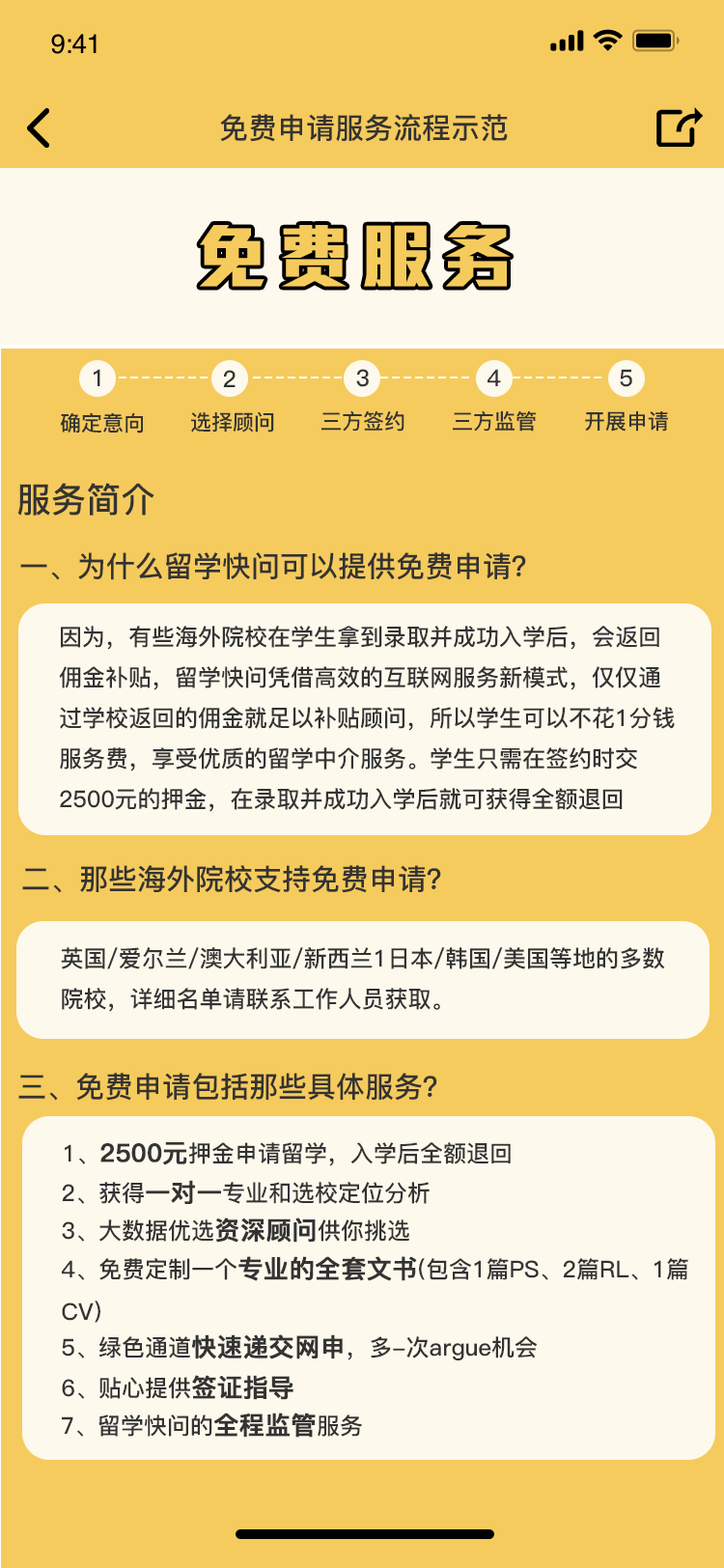
<style>
.page{position:relative;width:724px;height:1568px;background:#f6cb5d}
.page>*{position:absolute;margin:0}
.t1{font:29px "PingFang-SC-Bold";color:#333333}
.t2{font:69.5px "MStiffHeiPRC-UltraBold";letter-spacing:0.18em;color:#f6cb5d}
.t3{font:23.2px "PingFang-SC-Bold";letter-spacing:0.18em;color:#333333}
.t4{font:21.2px "PingFang-SC-Bold";color:#333333}
.t5{font:34.8px "PingFang-SC-Bold";color:#333333}
.t6{font:23.2px "PingFang-SC-Bold";color:#333333}
.t7{font:25.1px "PingFang-SC-Bold";color:#333333;font-weight:bold}
</style>
<div class="page">
<p class="t1" style="left:220px;top:114px;width:288px;height:28px">免费申请服务流程示范</p>
<p class="t2" style="left:200px;top:225px;width:311px;height:62px">免费服务</p>
<p class="t3" style="left:94px;top:369px;width:6px;height:17px">1</p>
<p class="t3" style="left:223px;top:370px;width:13px;height:17px">2</p>
<p class="t3" style="left:356px;top:369px;width:13px;height:18px">3</p>
<p class="t3" style="left:488px;top:369px;width:13px;height:17px">4</p>
<p class="t3" style="left:620px;top:369px;width:12px;height:18px">5</p>
<p class="t4" style="left:60px;top:412px;width:83px;height:22px">确定意向</p>
<p class="t4" style="left:191px;top:411px;width:83px;height:22px">选择顾问</p>
<p class="t4" style="left:322px;top:411px;width:83px;height:21px">三方签约</p>
<p class="t4" style="left:453px;top:410px;width:83px;height:22px">三方监管</p>
<p class="t4" style="left:585px;top:411px;width:83px;height:21px">开展申请</p>
<p class="t5" style="left:17px;top:483px;width:137px;height:33px">服务简介</p>
<p class="t1" style="left:20px;top:552px;width:506px;height:28px">一、为什么留学快问可以提供免费申请？</p>
<p class="t6" style="left:59px;top:626px;width:616px;height:186px">因为，有些海外院校在学生拿到录取并成功入学后，会返回<br>佣金补贴，留学快问凭借高效的互联网服务新模式，仅仅通<br>过学校返回的佣金就足以补贴顾问，所以学生可以不花1分钱<br>服务费，享受优质的留学中介服务。学生只需在签约时交<br>2500元的押金，在录取并成功入学后就可获得全额退回</p>
<p class="t1" style="left:22px;top:865px;width:419px;height:28px">二、那些海外院校支持免费申请？</p>
<p class="t6" style="left:61px;top:947px;width:604px;height:65px">英国/爱尔兰/澳大利亚/新西兰1日本/韩国/美国等地的多数<br>院校，详细名单请联系工作人员获取。</p>
<p class="t1" style="left:18px;top:1073px;width:419px;height:28px">三、免费申请包括那些具体服务？</p>
<p class="t6" style="left:65px;top:1142px;width:446px;height:24px">1、<span class="t7">2500元</span>押金申请留学，入学后全额退回</p>
<p class="t6" style="left:62px;top:1180px;width:368px;height:24px">2、获得<span class="t7">一对一</span>专业和选校定位分析</p>
<p class="t6" style="left:62px;top:1218px;width:347px;height:25px">3、大数据优选<span class="t7">资深顾问</span>供你挑选</p>
<p class="t6" style="left:62px;top:1256px;width:626px;height:67px">4、免费定制一个<span class="t7">专业的全套文书</span>(包含1篇PS、2篇RL、1篇<br>CV)</p>
<p class="t6" style="left:62px;top:1334px;width:476px;height:26px">5、绿色通道<span class="t7">快速递交网申</span>，多-次argue机会</p>
<p class="t6" style="left:62px;top:1375px;width:232px;height:25px">6、贴心提供<span class="t7">签证指导</span></p>
<p class="t6" style="left:62px;top:1413px;width:300px;height:25px">7、留学快问的<span class="t7">全程监管</span>服务</p>
</div>
